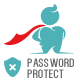
<style>
.page{position:relative;width:80px;height:80px;background:#ffffff}
.page>*{position:absolute;margin:0}
.t1{font:12px/11px "Kenzo";letter-spacing:0.025em;color:#6a6a6a}
</style>
<div class="page">
<p class="t1" style="left:27px;top:58px;width:47px;height:20px">password<br>protect</p>
</div>
